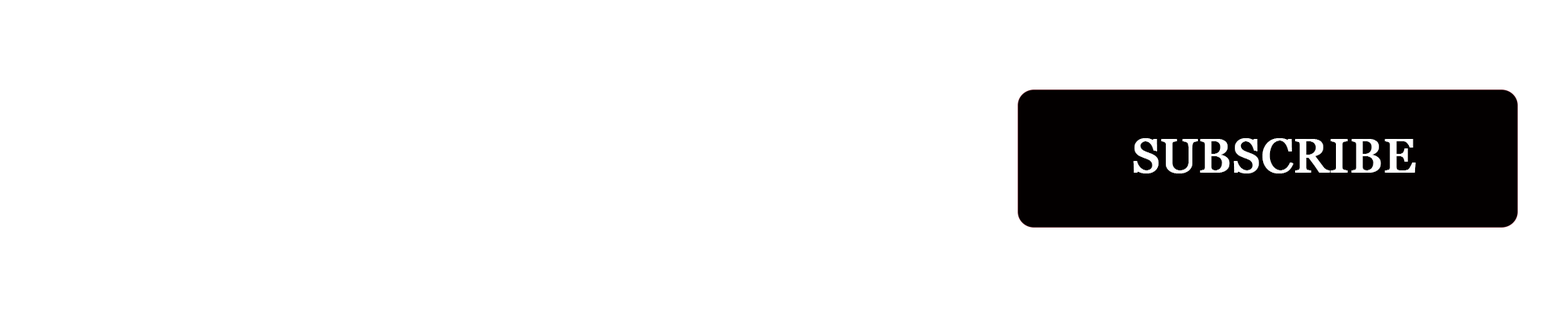
<style>
.page{position:relative;width:1568px;height:314px;background:#ffffff}
.page>*{position:absolute;margin:0}
.t1{font:47px "Georgia";color:#ffffff;font-weight:bold;scale:1.04 1}
</style>
<div class="page">
<p class="t1" style="left:1133px;top:138px;width:283px;height:35px">SUBSCRIBE</p>
</div>
